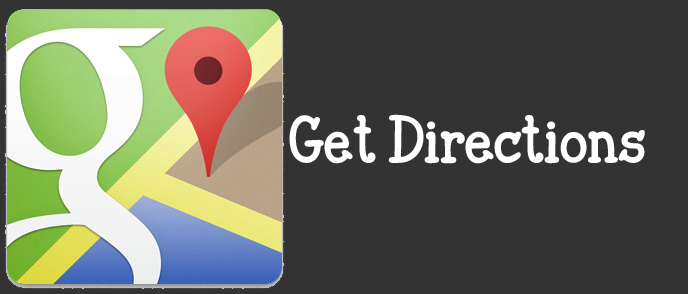
<style>
.page{position:relative;width:688px;height:294px;background:#333333}
.page>*{position:absolute;margin:0}
.t1{font:52px "JandaCloserToFree";color:#ffffff}
</style>
<div class="page">
<p class="t1" style="left:289px;top:114px;width:356px;height:50px">Get Directions</p>
</div>
